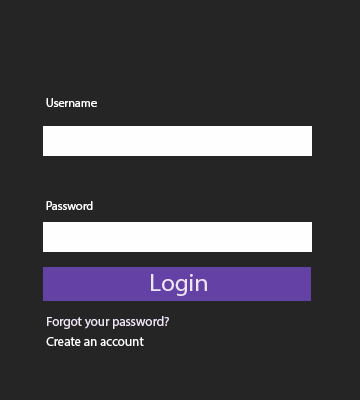
<style>
.page{position:relative;width:360px;height:400px;background:#252525}
.page>*{position:absolute;margin:0}
.t1{font:12px "MyriadPro-Regular";color:#ffffff}
.t2{font:25px "MyriadPro-Regular";color:#eee4f5}
.t3{font:13px "MyriadPro-Regular";color:#eee4f5}
.t4{font:13px "MyriadPro-Regular";color:#ffffff}
</style>
<div class="page">
<p class="t1" style="left:46px;top:98px;width:51px;height:9px">Username</p>
<p class="t1" style="left:46px;top:201px;width:47px;height:9px">Password</p>
<p class="t2" style="left:151px;top:274px;width:56px;height:22px">Login</p>
<p class="t3" style="left:47px;top:316px;width:122px;height:13px">Forgot your password?</p>
<p class="t4" style="left:46px;top:337px;width:98px;height:9px">Create an account</p>
</div>
